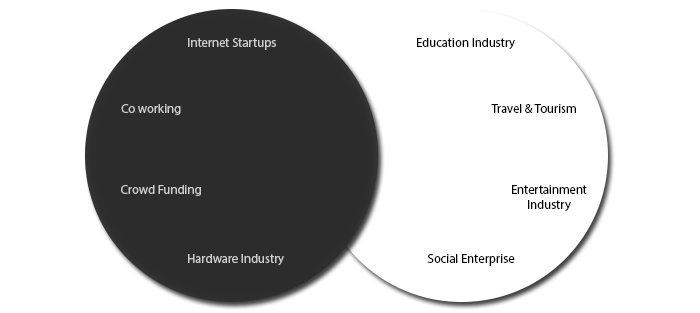
<style>
.page{position:relative;width:700px;height:313px;background:#ffffff}
.page>*{position:absolute;margin:0}
.t1{font:12.6px "MyriadPro-Regular";color:#cccccc}
.t2{font:12.6px "MyriadPro-Regular";color:#000000}
</style>
<div class="page">
<p class="t1" style="left:188px;top:38px;width:88px;height:12px">Internet Startups</p>
<p class="t2" style="left:417px;top:38px;width:98px;height:11px">Education Industry</p>
<p class="t1" style="left:121px;top:104px;width:60px;height:11px">Co working</p>
<p class="t2" style="left:491px;top:104px;width:85px;height:9px">Travel &amp; Tourism</p>
<p class="t1" style="left:121px;top:185px;width:80px;height:11px">Crowd Funding</p>
<p class="t2" style="left:512px;top:185px;width:75px;height:26px;text-align:center">Entertainment <br>Industry</p>
<p class="t1" style="left:188px;top:254px;width:96px;height:11px">Hardware Industry</p>
<p class="t2" style="left:427px;top:254px;width:88px;height:12px">Social Enterprise</p>
</div>
